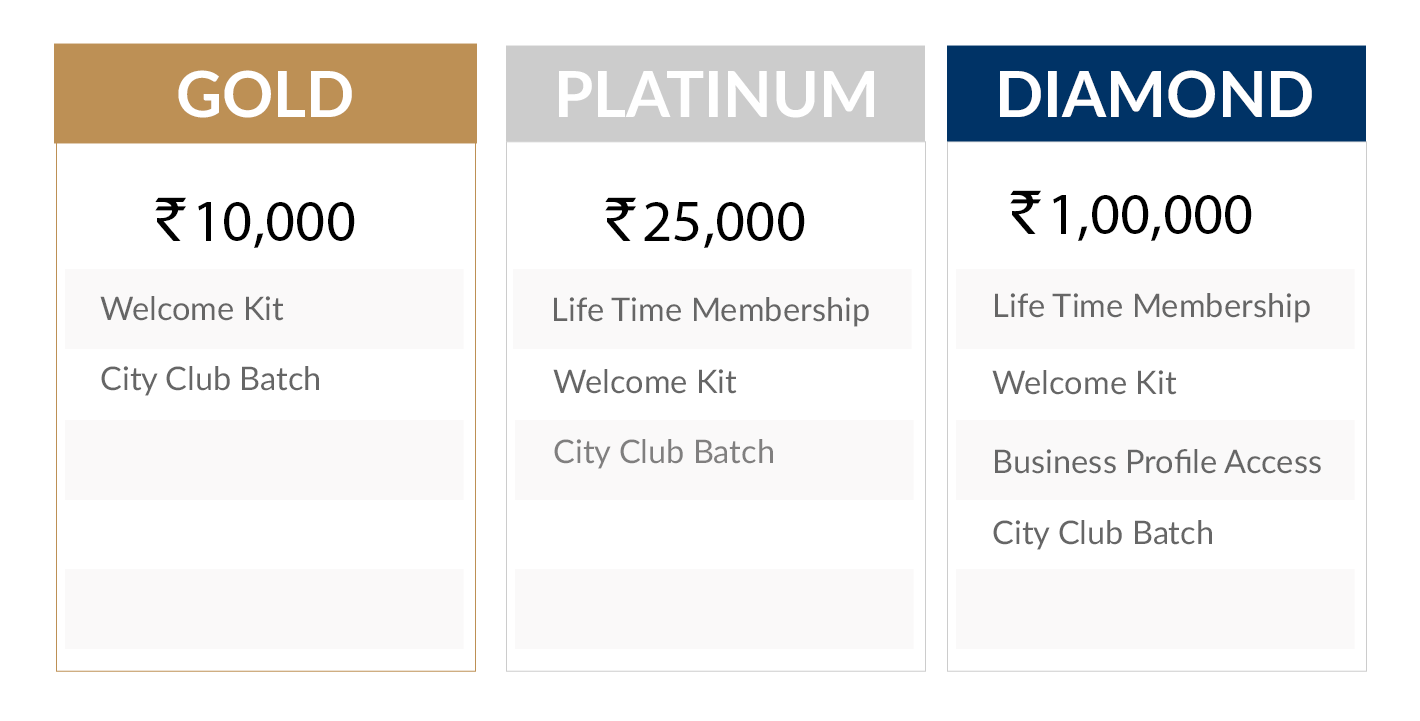
<style>
.page{position:relative;width:1420px;height:721px;background:#ffffff}
.page>*{position:absolute;margin:0}
.t1{font:63.5px "Lato-Bold";color:#ffffff;text-transform:uppercase}
.t2{font:59.2px "MyriadPro-Regular";color:#000000;text-transform:uppercase}
.t3{font:59.2px "IndianRupee-Regular";color:#000000;text-transform:uppercase}
.t4{font:32.6px "Lato-Regular";color:#666666}
.t5{font:32.5px "Lato-Regular";color:#666666}
.t6{font:32.5px "Lato-Regular";color:#807f7f}
</style>
<div class="page">
<p class="t1" style="left:178px;top:70px;width:174px;height:48px">GOLD</p>
<p class="t1" style="left:559px;top:71px;width:315px;height:47px">Platinum</p>
<p class="t1" style="left:1000px;top:70px;width:312px;height:48px">diamond</p>
<p class="t2" style="left:155px;top:197px;width:200px;height:51px"><span class="t3">L</span>10,000</p>
<p class="t2" style="left:605px;top:197px;width:200px;height:51px"><span class="t3">L</span>25,000</p>
<p class="t2" style="left:1010px;top:190px;width:242px;height:51px"><span class="t3">L</span>1,00,000</p>
<p class="t4" style="left:995px;top:293px;width:315px;height:30px">Life Time Membership</p>
<p class="t5" style="left:100px;top:296px;width:184px;height:25px">Welcome Kit</p>
<p class="t4" style="left:554px;top:297px;width:315px;height:30px">Life Time Membership</p>
<p class="t5" style="left:101px;top:366px;width:218px;height:30px">City Club Batch</p>
<p class="t5" style="left:553px;top:369px;width:184px;height:25px">Welcome Kit</p>
<p class="t4" style="left:992px;top:370px;width:185px;height:25px">Welcome Kit</p>
<p class="t6" style="left:554px;top:439px;width:219px;height:30px">City Club Batch</p>
<p class="t4" style="left:995px;top:449px;width:326px;height:25px">Business Profile Access</p>
<p class="t5" style="left:993px;top:520px;width:219px;height:30px">City Club Batch</p>
</div>
